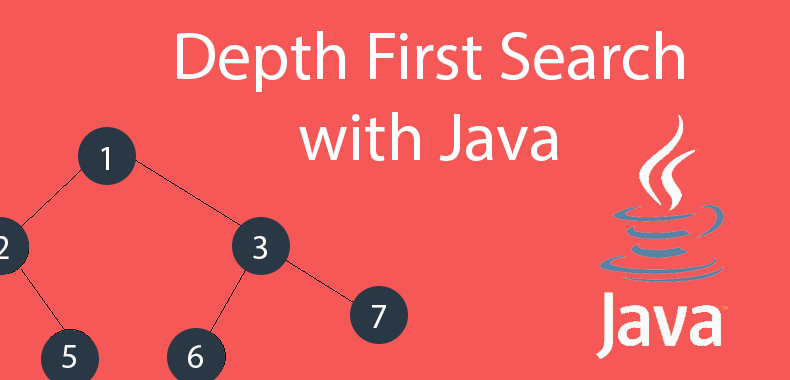
<style>
.page{position:relative;width:790px;height:380px;background:#f55856}
.page>*{position:absolute;margin:0}
.t1{font:68px "MyriadPro-Regular";color:#ffffff}
.t2{font:34px "MyriadPro-Regular";color:#ffffff}
</style>
<div class="page">
<p class="t1" style="left:177px;top:31px;width:507px;height:130px;text-align:center">Depth First Search with Java</p>
<p class="t2" style="left:101px;top:147px;width:8px;height:23px">1</p>
<p class="t2" style="left:253px;top:236px;width:14px;height:23px">3</p>
<p class="t2" style="left:372px;top:305px;width:14px;height:23px">7</p>
<p class="t2" style="left:62px;top:345px;width:14px;height:23px">5</p>
<p class="t2" style="left:188px;top:345px;width:15px;height:23px">6</p>
</div>
